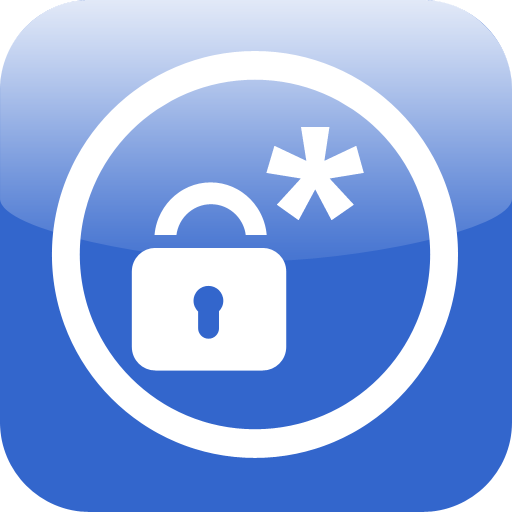
<style>
.page{position:relative;width:512px;height:512px;background:#3366cc}
.page>*{position:absolute;margin:0}
.t1{font:256px "StoneSansITC-Bold";color:#ffffff}
</style>
<div class="page">
<p class="t1" style="left:266px;top:127px;width:98px;height:93px">*</p>
</div>
